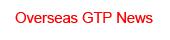
<style>
.page{position:relative;width:170px;height:40px;background:#ffffff}
.page>*{position:absolute;margin:0}
.t1{font:14.7px "ArialMT";color:#ff0000}
</style>
<div class="page">
<p class="t1" style="left:15px;top:12px;width:138px;height:11px">Overseas GTP News</p>
</div>
